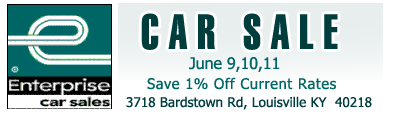
<style>
.page{position:relative;width:393px;height:120px;background:#ffffff}
.page>*{position:absolute;margin:0}
.t1{font:48px "Swiss911BT-ExtraCompressed";letter-spacing:0.2em;color:#003d3d}
.t2{font:16px "Tahoma";color:#006565}
.t3{font:14.7px "Tahoma";letter-spacing:0.04em;color:#006767}
.t4{font:13.3px "Tahoma";letter-spacing:0.01em;color:#003d3d}
</style>
<div class="page">
<p class="t1" style="left:141px;top:13px;width:197px;height:37px">CAR SALE</p>
<p class="t2" style="left:189px;top:57px;width:91px;height:15px">June 9,10,11</p>
<p class="t3" style="left:147px;top:77px;width:189px;height:13px">Save 1% Off Current Rates</p>
<p class="t4" style="left:126px;top:96px;width:246px;height:14px">3718 Bardstown Rd, Louisville KY  40218</p>
</div>
